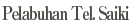
<style>
.page{position:relative;width:132px;height:27px;background:#ffffff}
.page>*{position:absolute;margin:0}
.t1{font:18px "RyuminPro-ExBold";letter-spacing:-0.08em;color:#4c4843;scale:0.85 1}
</style>
<div class="page">
<p class="t1" style="left:2px;top:6px;width:127px;height:14px">Pelabuhan Tel. Saiki</p>
</div>
